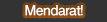
<style>
.page{position:relative;width:107px;height:22px;background:#333333}
.page>*{position:absolute;margin:0}
.t1{font:14px "FutoGoB101Pr5-Bold";letter-spacing:-0.04em;color:#ffffff}
</style>
<div class="page">
<p class="t1" style="left:25px;top:5px;width:58px;height:11px">Mendarat!</p>
</div>
